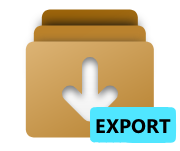
<style>
.page{position:relative;width:180px;height:151px;background:#ffffff}
.page>*{position:absolute;margin:0}
.t1{font:19.8px "SegoeUI-Bold";color:#000000}
</style>
<div class="page">
<p class="t1" style="left:96px;top:118px;width:75px;height:16px">EXPORT</p>
</div>
